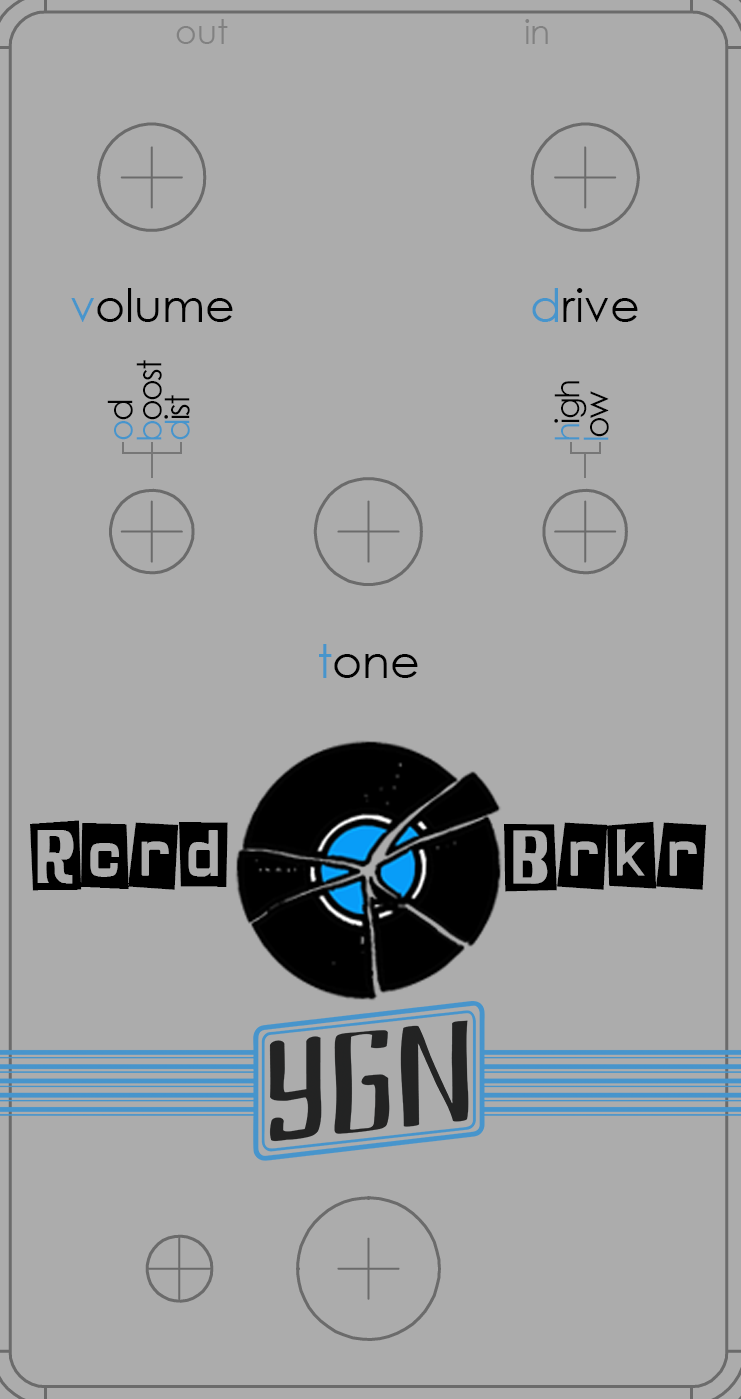
<style>
.page{position:relative;width:741px;height:1399px;background:#acacac}
.page>*{position:absolute;margin:0}
.t1{font:33.3px "CenturyGothic";color:#818181}
.t2{font:45.8px "CenturyGothic";color:#000000}
.t3{font:45.8px "CenturyGothic";color:#4795cc}
.t4{font:33.3px "CenturyGothic";letter-spacing:-0.06em;color:#000000}
.t5{font:33.3px "CenturyGothic";letter-spacing:-0.06em;color:#4795cc}
.t6{font:79.2px "SHINJI-BLUES";color:#000000}
</style>
<div class="page">
<p class="t1" style="left:176px;top:19px;width:372px;height:25px">out                                in</p>
<p class="t2" style="left:71px;top:288px;width:162px;height:34px"><span class="t3">v</span>olume</p>
<p class="t2" style="left:532px;top:288px;width:106px;height:34px"><span class="t3">d</span>rive</p>
<p class="t4" style="left:136px;top:360px;width:26px;height:80px;rotate:-90deg"><span class="t5">b</span>oost</p>
<p class="t4" style="left:554px;top:381px;width:33px;height:59px;rotate:-90deg"><span class="t5">h</span>igh</p>
<p class="t5" style="left:107px;top:400px;width:26px;height:40px;rotate:-90deg">o<span class="t4">d</span></p>
<p class="t4" style="left:164px;top:395px;width:26px;height:45px;rotate:-90deg"><span class="t5">d</span>ist</p>
<p class="t4" style="left:583px;top:391px;width:26px;height:49px;rotate:-90deg"><span class="t5">l</span>ow</p>
<p class="t2" style="left:319px;top:644px;width:99px;height:34px"><span class="t3">t</span>one</p>
<p class="t6" style="left:30px;top:820px;width:198px;height:71px">Rcrd</p>
<p class="t6" style="left:504px;top:821px;width:203px;height:71px">Brkr</p>
</div>
